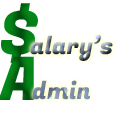
<style>
.page{position:relative;width:113px;height:113px;background:#ffffff}
.page>*{position:absolute;margin:0}
.t1{font:60px "FugazOne-Regular"}
.t2{font:24px "FugazOne-Regular"}
</style>
<div class="page">
<p class="t1" style="left:1px;top:3px;width:37px;height:60px">$</p>
<p class="t2" style="left:30px;top:34px;width:83px;height:27px">alary’s</p>
<p class="t1" style="left:0px;top:56px;width:34px;height:44px">A</p>
<p class="t2" style="left:32px;top:80px;width:58px;height:20px">dmin</p>
</div>
